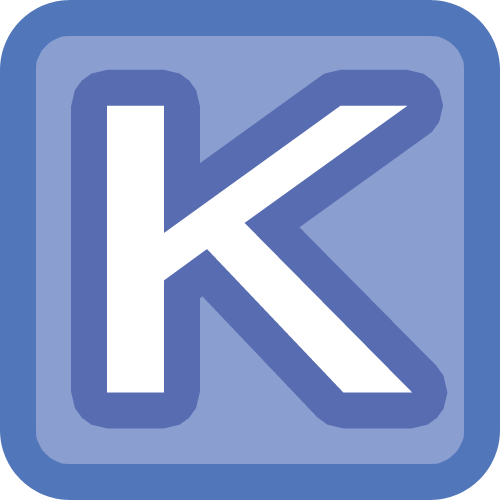
<style>
.page{position:relative;width:500px;height:500px;background:#8b9ed0}
.page>*{position:absolute;margin:0}
.t1{font:393px "Menlo-Regular";color:#ffffff;scale:1.46 1}
</style>
<div class="page">
<p class="t1" style="left:107px;top:105px;width:305px;height:288px">K</p>
</div>
